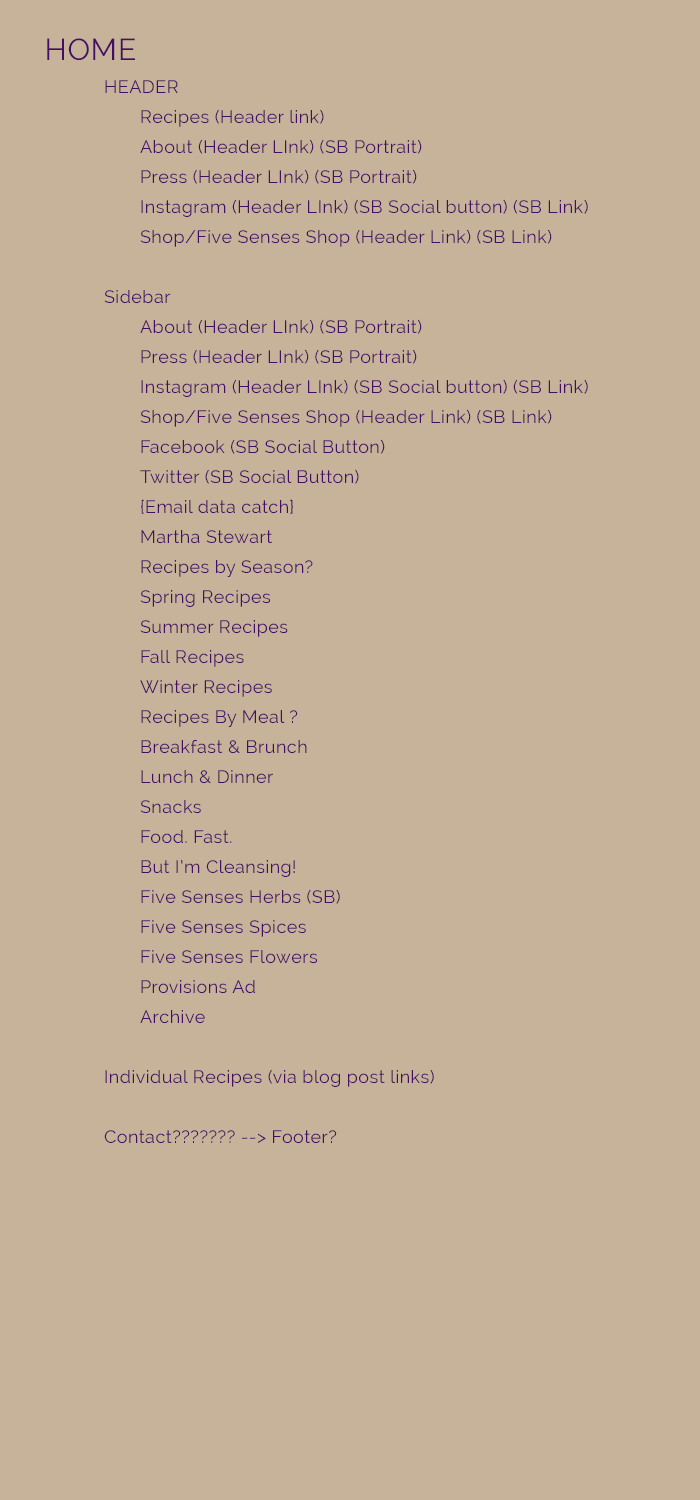
<style>
.page{position:relative;width:700px;height:1500px;background:#c7b29a}
.page>*{position:absolute;margin:0}
.t1{font:30px "Raleway";letter-spacing:0.025em;color:#440e62}
.t2{font:18px/30px "Raleway";letter-spacing:0.025em;color:#440e62}
</style>
<div class="page">
<p class="t1" style="left:47px;top:38px;width:88px;height:23px">HOME</p>
<p class="t2" style="left:104px;top:80px;width:484px;height:1064px">HEADER<br> Recipes (Header link)<br> About (Header LInk) (SB Portrait)<br> Press (Header LInk) (SB Portrait)<br> Instagram (Header LInk) (SB Social button) (SB Link)<br> Shop/Five Senses Shop (Header Link) (SB Link)<br><br>Sidebar<br> About (Header LInk) (SB Portrait)<br> Press (Header LInk) (SB Portrait)<br> Instagram (Header LInk) (SB Social button) (SB Link)<br> Shop/Five Senses Shop (Header Link) (SB Link)<br> Facebook (SB Social Button)<br> Twitter (SB Social Button)<br> {Email data catch}<br> Martha Stewart<br> Recipes by Season?<br> Spring Recipes<br> Summer Recipes<br> Fall Recipes<br> Winter Recipes<br> Recipes By Meal ?<br> Breakfast &amp; Brunch<br> Lunch &amp; Dinner<br> Snacks<br> Food. Fast. <br> But I’m Cleansing!<br> Five Senses Herbs (SB)<br> Five Senses Spices<br> Five Senses Flowers<br> Provisions Ad<br> Archive<br><br>Individual Recipes (via blog post links)<br><br>Contact??????? --&gt; Footer?</p>
</div>
